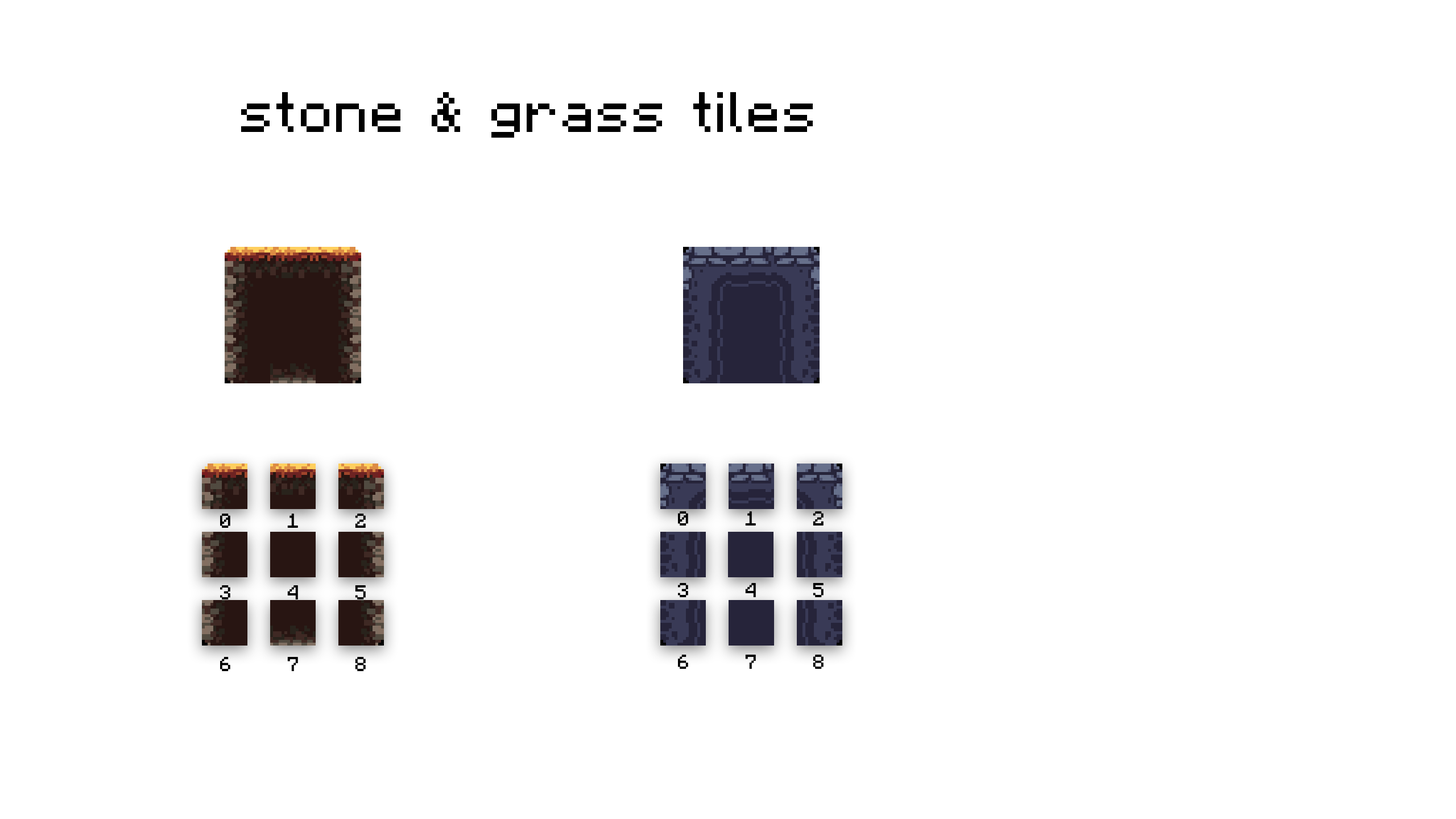
<style>
.page{position:relative;width:1456px;height:819px;background:#ffffff}
.page>*{position:absolute;margin:0}
.t1{font:56.9px "Minecraft-Regular";letter-spacing:0.025em;color:#000000}
</style>
<div class="page">
<p class="t1" style="left:241px;top:92px;width:572px;height:46px">stone &amp; grass tiles</p>
</div>
